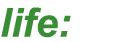
<style>
.page{position:relative;width:134px;height:42px;background:#ffffff}
.page>*{position:absolute;margin:0}
.t1{font:40px "Arial-BoldItalicMT";color:#398e35}
</style>
<div class="page">
<p class="t1" style="left:1px;top:7px;width:70px;height:31px">life:</p>
</div>
